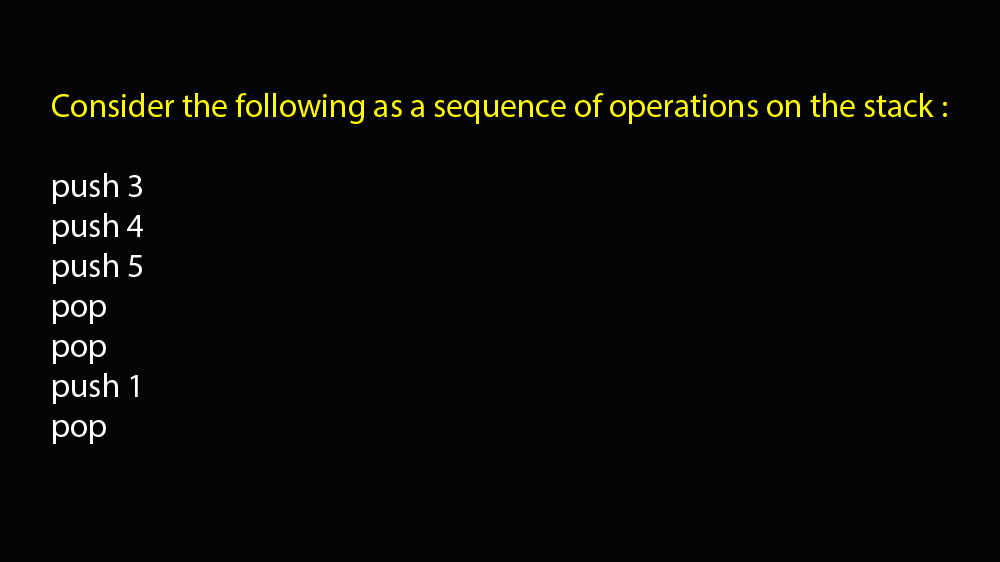
<style>
.page{position:relative;width:1000px;height:562px;background:#050404}
.page>*{position:absolute;margin:0}
.t1{font:33.3px "MyriadPro-Regular";color:#fefb04}
.t2{font:33.3px "MyriadPro-Regular";color:#ffffff}
</style>
<div class="page">
<p class="t1" style="left:52px;top:93px;width:895px;height:351px">Consider the following as a sequence of operations on the stack :<br><span class="t2"><br>push 3<br>push 4<br>push 5<br>pop<br>pop<br>push 1<br>pop</span></p>
</div>
